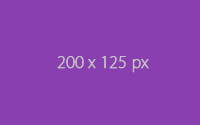
<style>
.page{position:relative;width:200px;height:125px;background:#8a3fb1}
.page>*{position:absolute;margin:0}
.t1{font:16px "KozGoPro-ExtraLight";color:#c3c3c3;font-weight:bold}
</style>
<div class="page">
<p class="t1" style="left:57px;top:56px;width:92px;height:17px">200 x 125 px</p>
</div>
